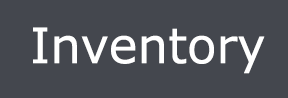
<style>
.page{position:relative;width:288px;height:98px;background:#44474e}
.page>*{position:absolute;margin:0}
.t1{font:48.9px "Verdana";color:#ffffff}
</style>
<div class="page">
<p class="t1" style="left:33px;top:27px;width:232px;height:47px">Inventory</p>
</div>
